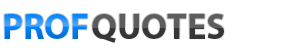
<style>
.page{position:relative;width:297px;height:48px;background:#ffffff}
.page>*{position:absolute;margin:0}
.t1{font:36px "MyriadPro-Bold";text-transform:uppercase}
</style>
<div class="page">
<p class="t1" style="left:4px;top:14px;width:84px;height:25px">Prof</p>
<p class="t1" style="left:92px;top:14px;width:132px;height:29px">QUOTES</p>
</div>
